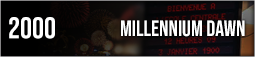
<style>
.page{position:relative;width:255px;height:57px}
.page>*{position:absolute;margin:0}
.t1{font:30px "BebasNeue-Regular";color:#ffffff}
.t2{font:22px "BebasNeue-Regular";color:#ffffff}
</style>
<div class="page">
<p class="t1" style="left:9px;top:17px;width:46px;height:22px">2000</p>
<p class="t2" style="left:121px;top:20px;width:124px;height:17px">Millennium Dawn</p>
</div>
